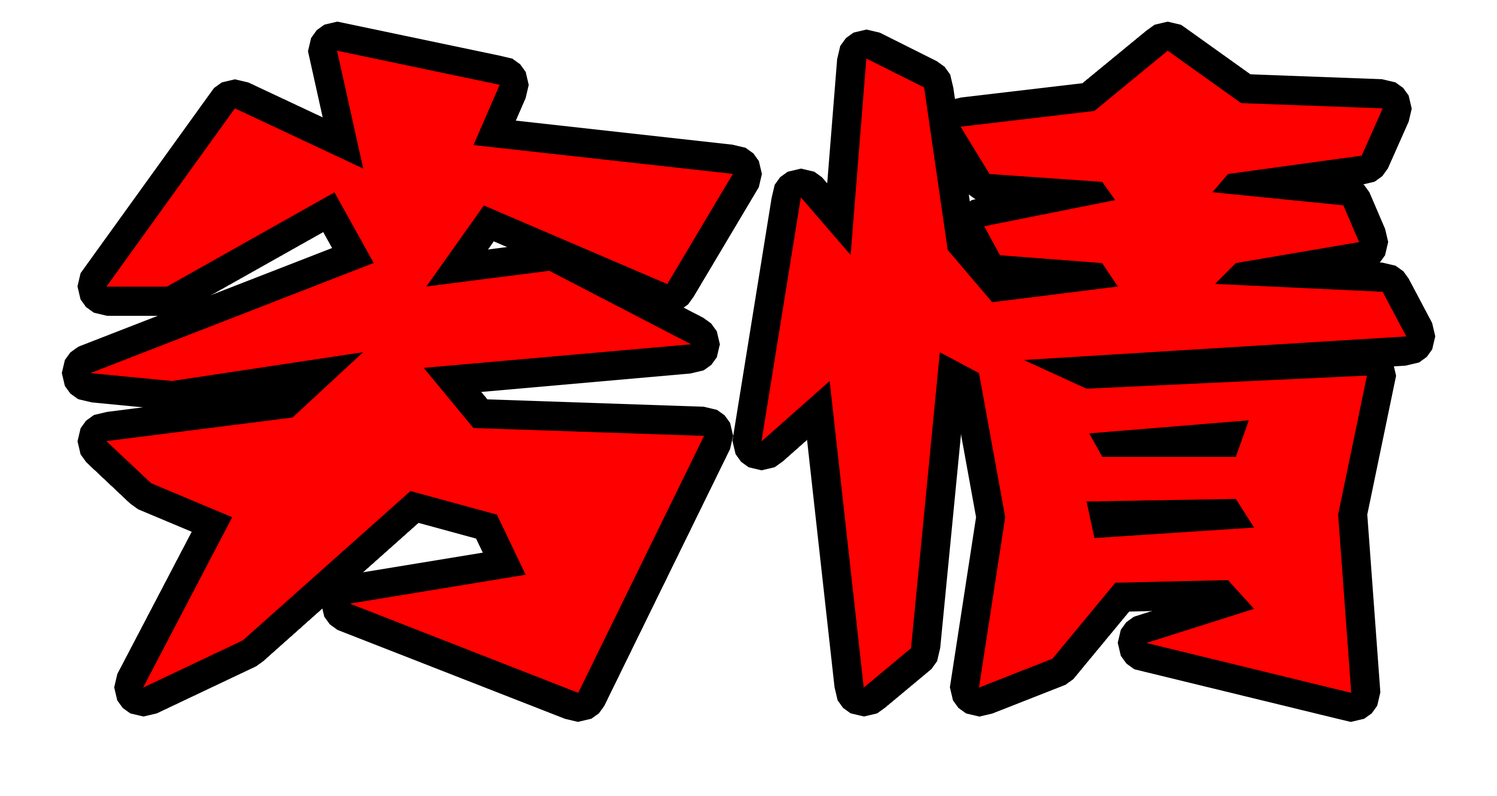
<style>
.page{position:relative;width:1497px;height:796px;background:#ffffff}
.page>*{position:absolute;margin:0}
.t1{font:670.9px "FZJZFW--GB1-0";color:#ff0000}
</style>
<div class="page">
<p class="t1" style="left:91px;top:51px;width:1316px;height:642px">劣情</p>
</div>
